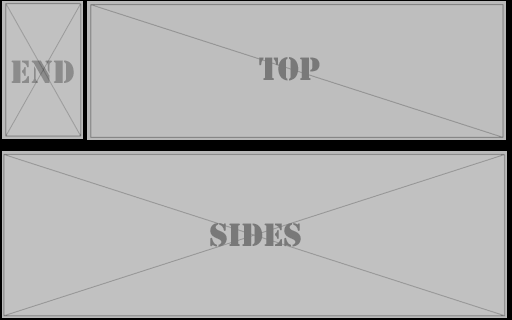
<style>
.page{position:relative;width:512px;height:320px;background:#c1c1c1}
.page>*{position:absolute;margin:0}
.t1{font:30px "StencilStd";color:#797979}
</style>
<div class="page">
<p class="t1" style="left:11px;top:60px;width:63px;height:23px">end</p>
<p class="t1" style="left:259px;top:57px;width:61px;height:24px">TOP</p>
<p class="t1" style="left:210px;top:223px;width:91px;height:24px">Sides</p>
</div>
